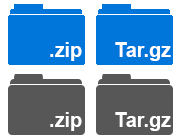
<style>
.page{position:relative;width:180px;height:140px;background:#ffffff}
.page>*{position:absolute;margin:0}
.t1{font:20.3px "Arial-BoldMT";color:#ffffff}
</style>
<div class="page">
<p class="t1" style="left:50px;top:42px;width:32px;height:19px">.zip</p>
<p class="t1" style="left:115px;top:42px;width:56px;height:19px">Tar.gz</p>
<p class="t1" style="left:50px;top:112px;width:32px;height:19px">.zip</p>
<p class="t1" style="left:115px;top:112px;width:56px;height:19px">Tar.gz</p>
</div>
